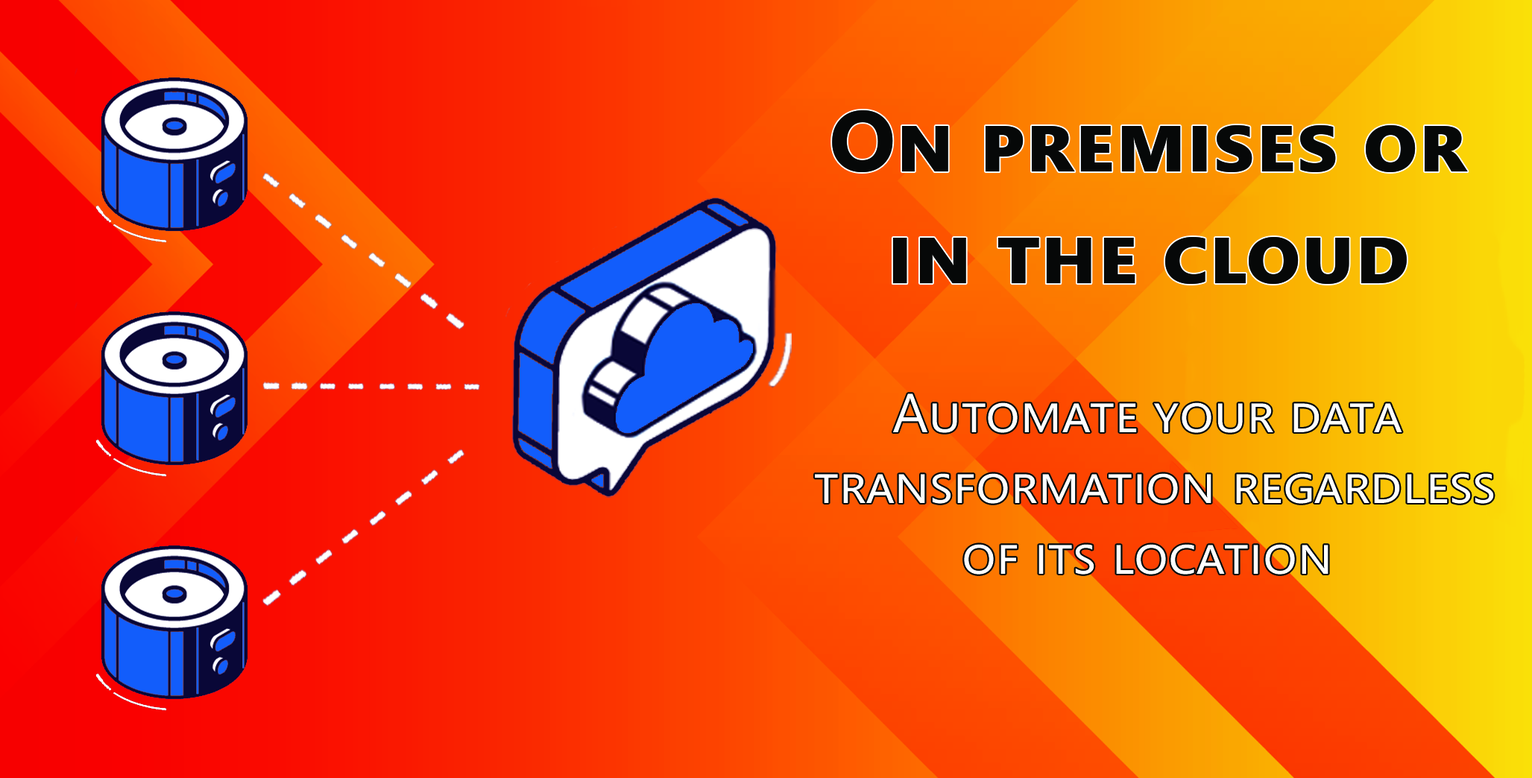
<style>
.page{position:relative;width:1532px;height:778px}
.page>*{position:absolute;margin:0}
.t1{font:86.7px "SegoeUI-Bold";color:#060808;font-variant:small-caps}
.t2{font:54.9px "SegoeUI";color:#feffff;font-variant:small-caps}
</style>
<div class="page">
<p class="t1" style="left:832px;top:110px;width:636px;height:174px;text-align:center">On premises or<br>in the cloud</p>
<p class="t2" style="left:815px;top:394px;width:679px;height:181px;text-align:center">Automate your data <br>transformation regardless<br>of its location</p>
</div>
